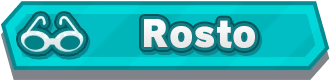
<style>
.page{position:relative;width:330px;height:80px}
.page>*{position:absolute;margin:0}
.t1{font:36px "RodinPro-UB";letter-spacing:0.014em;color:#f1f1f1}
</style>
<div class="page">
<p class="t1" style="left:144px;top:19px;width:111px;height:29px">Rosto</p>
</div>
